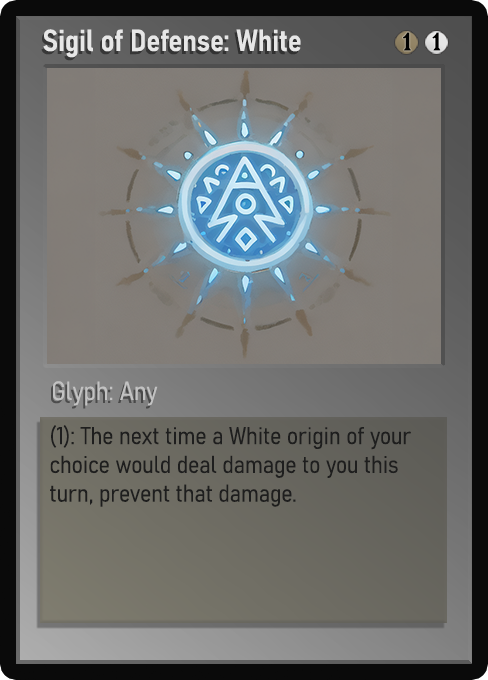
<style>
.page{position:relative;width:488px;height:680px}
.page>*{position:absolute;margin:0}
.t1{font:30px "Bahnschrift-SemiBoldSemiCondensed";color:#f2f2f2;font-weight:bold}
.t2{font:25px "WTRRoycroft";color:#000000;font-weight:bold;scale:1.09 1}
.t3{font:26px "Bahnschrift-LightSemiCondensed";color:#c8c8c8;font-weight:bold}
.t4{font:24px "Bahnschrift-LightSemiCondensed";color:#1e1e1e;font-weight:bold}
</style>
<div class="page">
<p class="t1" style="left:43px;top:29px;width:258px;height:29px;opacity:0.9">Sigil of Defense: White</p>
<p class="t2" style="left:403px;top:32px;width:8px;height:19px">1</p>
<p class="t2" style="left:432px;top:32px;width:9px;height:19px">1</p>
<p class="t3" style="left:53px;top:381px;width:105px;height:25px;opacity:0.9">Glyph: Any</p>
<p class="t4" style="left:50px;top:425px;width:361px;height:82px">(1): The next time a White origin of your choice would deal damage to you this turn, prevent that damage.</p>
</div>
